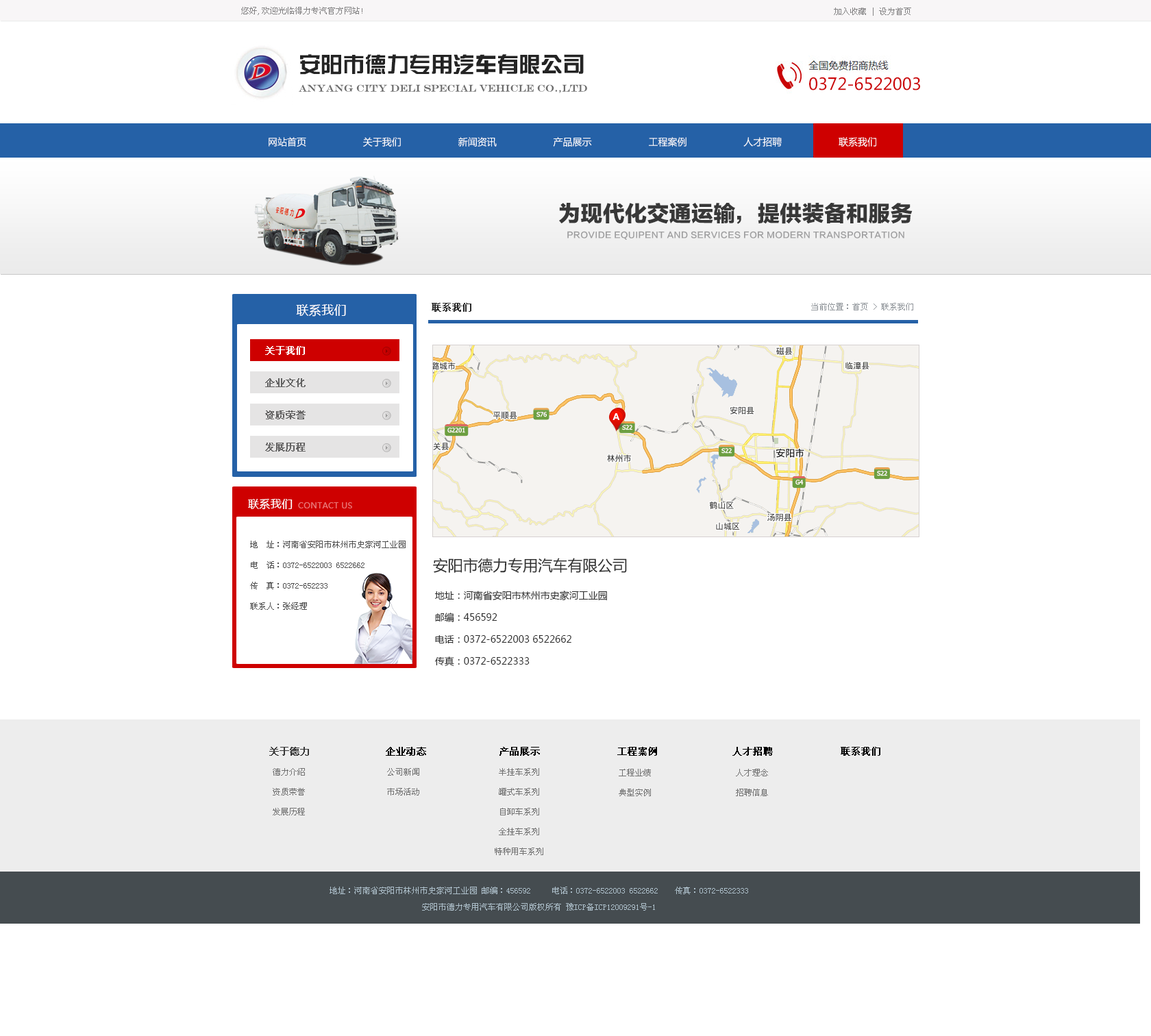
<style>
.page{position:relative;width:1151px;height:1036px;background:#ffffff}
.page>*{position:absolute;margin:0}
.t1{font:8.2px "SimSun";color:#848384}
.t2{font:21.9px "FZZYJW--GB1-0";color:#242424}
.t3{font:16.4px "MicrosoftYaHei";color:#cc0407}
.t4{font:9.6px "EngraversMT";color:#6d6d6d}
.t5{font:9.6px "MicrosoftYaHei";color:#ffffff}
.t6{font:21.9px "FZLTTHJW--GB1-0";color:#383838}
.t7{font:8.2px "FZLTZHK--GBK1-0";letter-spacing:0.02em;color:#9e9e9f}
.t8{font:12.3px "MicrosoftYaHei";letter-spacing:0.02em;color:#ffffff}
.t9{font:9.6px "SimSun";color:#2a2a2a;font-weight:bold}
.t10{font:8.2px "SimSun";color:#90959a}
.t11{font:9.6px "SimSun";letter-spacing:0.02em;color:#ffffff;font-weight:bold}
.t12{font:9.6px "SimSun";letter-spacing:0.02em;color:#636262;font-weight:bold}
.t13{font:11px "MicrosoftYaHei";letter-spacing:0.02em;color:#fefefe}
.t14{font:8.2px "MicrosoftYaHei";letter-spacing:0.02em;color:#e97575}
.t15{font:8.2px/20.6px "SimSun";color:#505050}
.t16{font:15.1px "MicrosoftYaHei";color:#2c2c2c}
.t17{font:9.6px/21.9px "MicrosoftYaHei";color:#2c2c2c}
.t18{font:9.6px "SimSun";color:#3a3a3a;font-weight:bold}
.t19{font:9.6px "SimSun";color:#000000;font-weight:bold}
.t20{font:8.2px/19.9px "SimSun";color:#727272}
.t21{font:8.2px/16.4px "SimSun";color:#adbfca}
</style>
<div class="page">
<p class="t1" style="left:241px;top:7px;width:121px;height:8px">您好,欢迎光临得力专汽官方网站!</p>
<p class="t1" style="left:834px;top:8px;width:77px;height:8px">加入收藏 | 设为首页</p>
<p class="t2" style="left:300px;top:54px;width:284px;height:21px">安阳市德力专用汽车有限公司</p>
<p class="t3" style="left:809px;top:77px;width:111px;height:13px">0372-6522003</p>
<p class="t4" style="left:299px;top:84px;width:288px;height:9px">ANYANG CITY DELI SPECIAL VEHICLE CO.,LTD</p>
<p class="t5" style="left:269px;top:137px;width:607px;height:10px">网站首页                    关于我们                    新闻资讯                    产品展示                    工程案例                    人才招聘                    联系我们</p>
<p class="t6" style="left:559px;top:203px;width:354px;height:21px">为现代化交通运输，提供装备和服务</p>
<p class="t7" style="left:567px;top:231px;width:337px;height:9px">PROVIDE EQUIPENT AND SERVICES FOR MODERN TRANSPORTATION</p>
<p class="t8" style="left:296px;top:304px;width:50px;height:13px">联系我们</p>
<p class="t9" style="left:432px;top:303px;width:39px;height:9px">联系我们</p>
<p class="t10" style="left:811px;top:303px;width:102px;height:7px">当前位置：首页 &gt; 联系我们</p>
<p class="t11" style="left:265px;top:346px;width:40px;height:9px">关于我们</p>
<p class="t12" style="left:265px;top:378px;width:41px;height:9px">企业文化</p>
<p class="t12" style="left:265px;top:410px;width:41px;height:9px">资质荣誉</p>
<p class="t12" style="left:265px;top:443px;width:41px;height:9px">发展历程</p>
<p class="t13" style="left:248px;top:499px;width:45px;height:11px">联系我们</p>
<p class="t14" style="left:298px;top:502px;width:54px;height:6px">CONTACT US</p>
<p class="t15" style="left:250px;top:541px;width:156px;height:69px">地  址：河南省安阳市林州市史家河工业园<br>电  话：0372-6522003 6522662<br>传  真：0372-652233<br>联系人：张经理</p>
<p class="t16" style="left:433px;top:558px;width:194px;height:15px">安阳市德力专用汽车有限公司</p>
<p class="t17" style="left:434px;top:591px;width:173px;height:75px">地址：河南省安阳市林州市史家河工业园<br>邮编：456592<br>电话：0372-6522003 6522662<br>传真：0372-6522333</p>
<p class="t18" style="left:269px;top:747px;width:40px;height:9px">关于德力</p>
<p class="t19" style="left:386px;top:747px;width:40px;height:9px">企业动态</p>
<p class="t19" style="left:499px;top:747px;width:41px;height:9px">产品展示</p>
<p class="t19" style="left:617px;top:747px;width:40px;height:9px">工程案例</p>
<p class="t19" style="left:732px;top:747px;width:41px;height:9px">人才招聘</p>
<p class="t19" style="left:841px;top:747px;width:39px;height:9px">联系我们</p>
<p class="t20" style="left:273px;top:768px;width:32px;height:47px">德力介绍<br>资质荣誉<br>发展历程</p>
<p class="t20" style="left:387px;top:768px;width:32px;height:27px">公司新闻<br>市场活动</p>
<p class="t20" style="left:495px;top:768px;width:48px;height:87px;text-align:center">半挂车系列<br>罐式车系列<br>自卸车系列<br>全挂车系列<br>特种用车系列</p>
<p class="t20" style="left:619px;top:769px;width:32px;height:27px;text-align:center">工程业绩<br>典型实例</p>
<p class="t20" style="left:736px;top:769px;width:32px;height:27px;text-align:center">人才理念<br>招聘信息</p>
<p class="t21" style="left:330px;top:887px;width:418px;height:24px;text-align:center">地址：河南省安阳市林州市史家河工业园 邮编：456592 　　电话：0372-6522003 6522662　　传真：0372-6522333<br>安阳市德力专用汽车有限公司版权所有 豫ICP备ICP12009291号-1</p>
</div>
